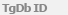
<style>
.page{position:relative;width:68px;height:15px;background:#f1f1f1}
.page>*{position:absolute;margin:0}
.t1{font:11px "Verdana-Bold";letter-spacing:-0.08em;color:#888888}
</style>
<div class="page">
<p class="t1" style="left:2px;top:3px;width:46px;height:11px">TgDb ID</p>
</div>
